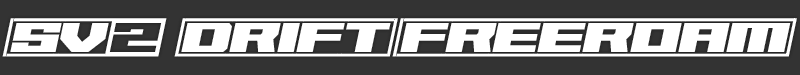
<style>
.page{position:relative;width:800px;height:75px;background:#333333}
.page>*{position:absolute;margin:0}
.t1{font:38.1px "62DRAGZ";color:#ffffff}
</style>
<div class="page">
<p class="t1" style="left:2px;top:18px;width:795px;height:39px">(sv2 (drift)(freeroam)</p>
</div>
